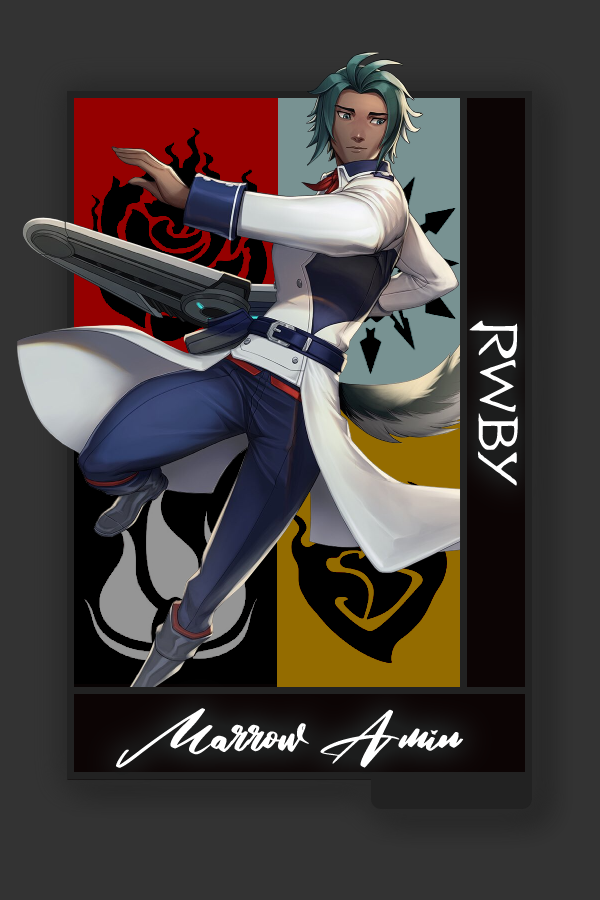
<style>
.page{position:relative;width:600px;height:900px;background:#333333}
.page>*{position:absolute;margin:0}
.t1{font:61.3px "RWBY_Style";color:#ffffff;scale:1.25 1}
.t2{font:75px "RosegaFREE";color:#ffffff}
</style>
<div class="page">
<p class="t1" style="left:469px;top:320px;width:49px;height:166px;rotate:90deg">RWBY</p>
<p class="t2" style="left:115px;top:708px;width:349px;height:60px">Marrow Amin</p>
</div>
